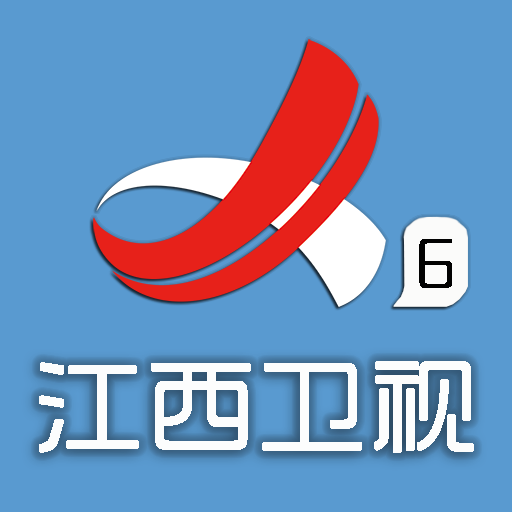
<style>
.page{position:relative;width:512px;height:512px;background:#599ad0}
.page>*{position:absolute;margin:0}
.t1{font:65.7px "SJshishang-Regular";letter-spacing:0.02em;color:#020202;font-weight:bold}
.t2{font:106.7px "SJshishang-Regular";letter-spacing:0.02em;color:#fcfdfd;font-weight:bold}
</style>
<div class="page">
<p class="t1" style="left:419px;top:239px;width:33px;height:49px">6</p>
<p class="t2" style="left:39px;top:361px;width:435px;height:92px">江西卫视</p>
</div>
